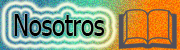
<style>
.page{position:relative;width:180px;height:50px}
.page>*{position:absolute;margin:0}
.t1{font:30px "Tahoma";color:#000000;scale:0.78 1}
</style>
<div class="page">
<p class="t1" style="left:14px;top:14px;width:91px;height:22px">Nosotros</p>
</div>
